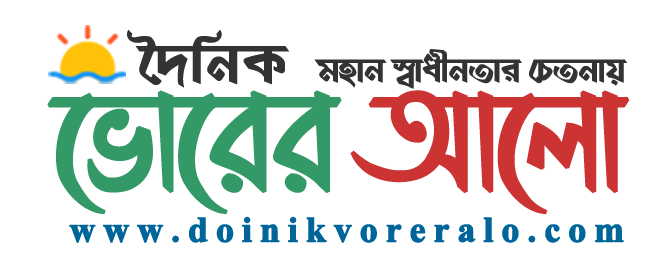
<style>
.page{position:relative;width:667px;height:272px;background:#ffffff}
.page>*{position:absolute;margin:0}
.t1{font:69.5px "TohaBornoANSIV1";color:#333333;font-weight:bold}
.t2{font:41.7px "TohaBornoANSIV2";letter-spacing:-0.04em;color:#333333;font-weight:bold}
.t3{font:148.5px "LiShamimChitraneeANSIV1";letter-spacing:-0.05em;color:#339966;font-weight:bold}
.t4{font:148.5px "LiShamimChitraneeANSIV1";letter-spacing:-0.05em;color:#cc3333;font-weight:bold}
.t5{font:35.8px "TimesNewRomanPS-BoldMT";letter-spacing:0.2em;color:#006699;font-weight:bold}
</style>
<div class="page">
<p class="t1" style="left:127px;top:30px;width:162px;height:58px">‰`wbK</p>
<p class="t2" style="left:314px;top:49px;width:313px;height:40px">gnvb ¯^vaxbZvi †PZbvq</p>
<p class="t3" style="left:47px;top:90px;width:583px;height:125px">‡fv‡ii <span class="t4">Av‡jv</span></p>
<p class="t5" style="left:69px;top:216px;width:555px;height:27px">www.doinikvoreralo.com</p>
</div>
